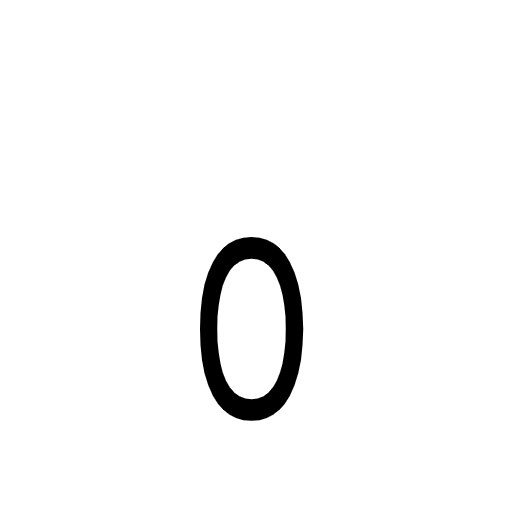
<style>
.page{position:relative;width:512px;height:512px;background:#ffffff}
.page>*{position:absolute;margin:0}
.t1{font:256px "VarelaRound-Regular";color:#000000;scale:0.74 1}
</style>
<div class="page">
<p class="t1" style="left:199px;top:237px;width:105px;height:184px">0</p>
</div>
